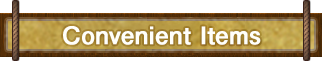
<style>
.page{position:relative;width:322px;height:61px;background:#ffffff}
.page>*{position:absolute;margin:0}
.t1{font:24px "FutoGoB101Pr5-Bold";color:#fffffa;font-weight:bold}
</style>
<div class="page">
<p class="t1" style="left:63px;top:26px;width:198px;height:19px">Convenient Items</p>
</div>
